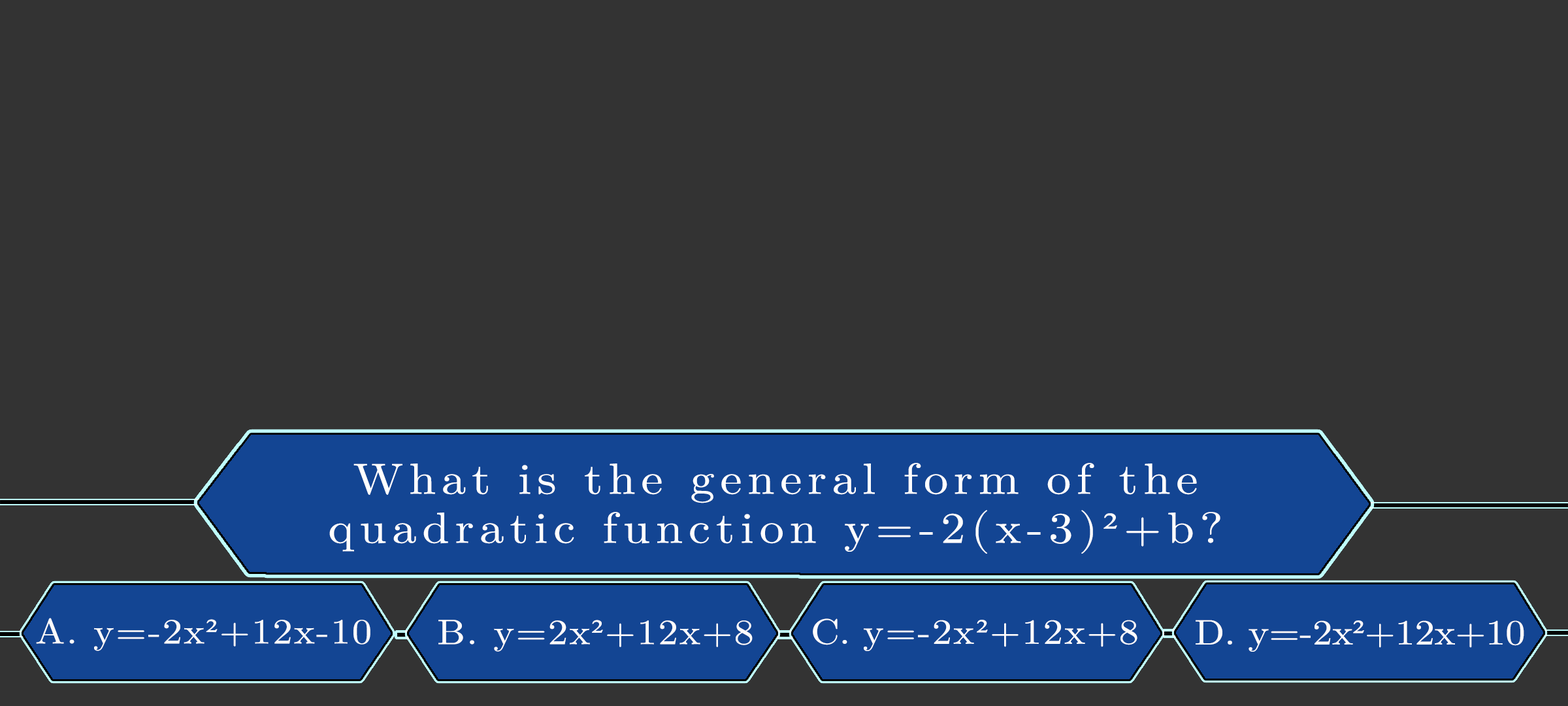
<style>
.page{position:relative;width:1568px;height:706px;background:#333333}
.page>*{position:absolute;margin:0}
.t1{font:43.6px/49px "LatinModernMath-Regular";letter-spacing:0.115em;color:#ffffff;scale:1.12 1}
.t2{font:43.6px/49px "TimesNewRomanPSMT";letter-spacing:0.115em;color:#ffffff;scale:1.12 1}
.t3{font:35.4px "LatinModernMath-Regular";letter-spacing:0.035em;color:#fcfbfb;scale:1.12 1}
.t4{font:35.4px "LatinModernMath-Regular";letter-spacing:0.035em;color:#fcfbfb;text-transform:uppercase;scale:1.12 1}
.t5{font:35.4px "TimesNewRomanPSMT";letter-spacing:0.035em;color:#fcfbfb;scale:1.12 1}
.t6{font:35.4px "LatinModernMath-Regular";letter-spacing:0.035em;color:#fefcfc;scale:1.12 1}
.t7{font:35.4px "LatinModernMath-Regular";letter-spacing:0.035em;color:#fefcfc;text-transform:uppercase;scale:1.12 1}
.t8{font:35.4px "TimesNewRomanPSMT";letter-spacing:0.035em;color:#fefcfc;scale:1.12 1}
.t9{font:35.4px "LatinModernMath-Regular";letter-spacing:0.035em;color:#fffefe;scale:1.12 1}
.t10{font:35.4px "LatinModernMath-Regular";letter-spacing:-0.005em;color:#fffefe;text-transform:uppercase;scale:1.12 1}
.t11{font:35.4px "TimesNewRomanPSMT";letter-spacing:0.035em;color:#fffefe;scale:1.12 1}
.t12{font:35.4px "LatinModernMath-Regular";letter-spacing:-0.005em;color:#fefcfc;scale:1.12 1}
.t13{font:35.4px "LatinModernMath-Regular";letter-spacing:-0.005em;color:#fefcfc;text-transform:uppercase;scale:1.12 1}
.t14{font:35.4px "TimesNewRomanPSMT";letter-spacing:-0.005em;color:#fefcfc;scale:1.12 1}
</style>
<div class="page">
<p class="t1" style="left:329px;top:463px;width:891px;height:90px;text-align:center">What is the general form of the<br>quadratic function y=-2(x-3)<span class="t2">²</span>+b?</p>
<p class="t3" style="left:36px;top:617px;width:334px;height:34px"><span class="t4">a.</span> y=-2x<span class="t5">²</span>+12x-10</p>
<p class="t6" style="left:438px;top:619px;width:315px;height:32px"><span class="t7">b. </span>y=2x<span class="t8">²</span>+12x+8</p>
<p class="t9" style="left:813px;top:618px;width:324px;height:33px"><span class="t10">c. </span>y=-2x<span class="t11">²</span>+12x+8</p>
<p class="t12" style="left:1196px;top:619px;width:328px;height:32px"><span class="t13">d.</span> y=-2x<span class="t14">²</span>+12x+10</p>
</div>
